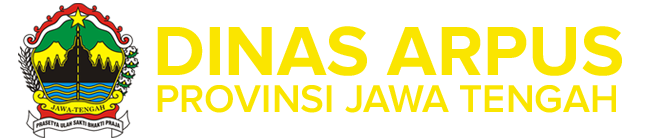
<style>
.page{position:relative;width:648px;height:140px;background:#ffffff}
.page>*{position:absolute;margin:0}
.t1{font:72px "Proxima_Nova_Bold";color:#fae500}
.t2{font:40px "Proxima_Nova_Semibold";color:#fae500}
</style>
<div class="page">
<p class="t1" style="left:157px;top:26px;width:465px;height:50px">DINAS ARPUS</p>
<p class="t2" style="left:157px;top:85px;width:459px;height:28px">PROVINSI JAWA TENGAH</p>
</div>
